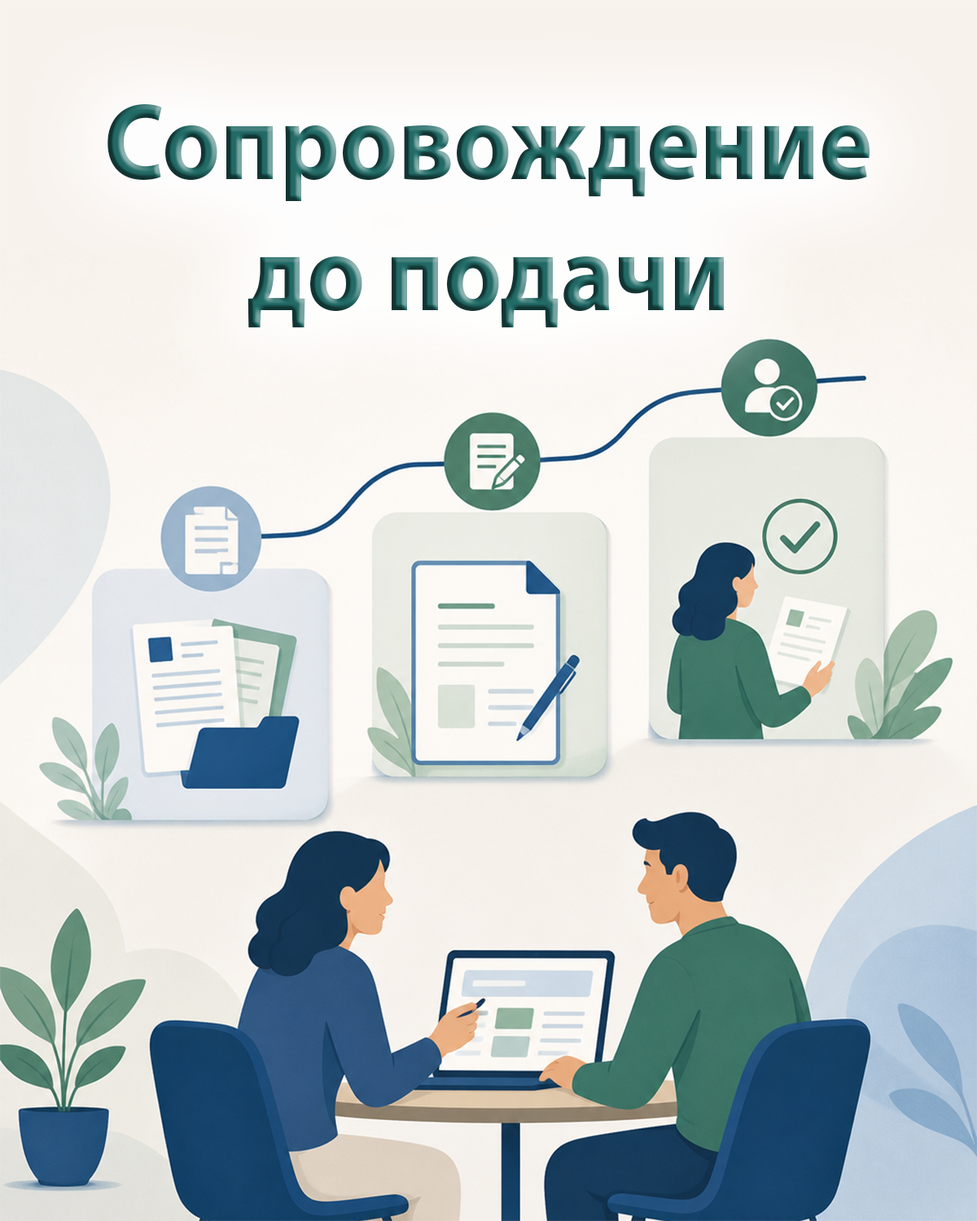
<style>
.page{position:relative;width:977px;height:1221px}
.page>*{position:absolute;margin:0}
.t1{font:109.4px "MyriadPro-Bold";scale:0.92 1}
</style>
<div class="page">
<p class="t1" style="left:107px;top:104px;width:762px;height:224px;text-align:center">Сопровождение<br>до подачи</p>
</div>
